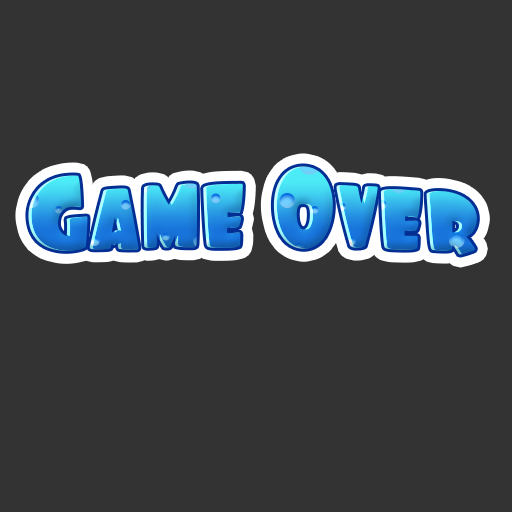
<style>
.page{position:relative;width:512px;height:512px;background:#333333}
.page>*{position:absolute;margin:0}
.t1{font:100px "Foo-Regular";letter-spacing:-0.01em}
</style>
<div class="page">
<p class="t1" style="left:28px;top:166px;width:449px;height:89px">Game Over</p>
</div>
